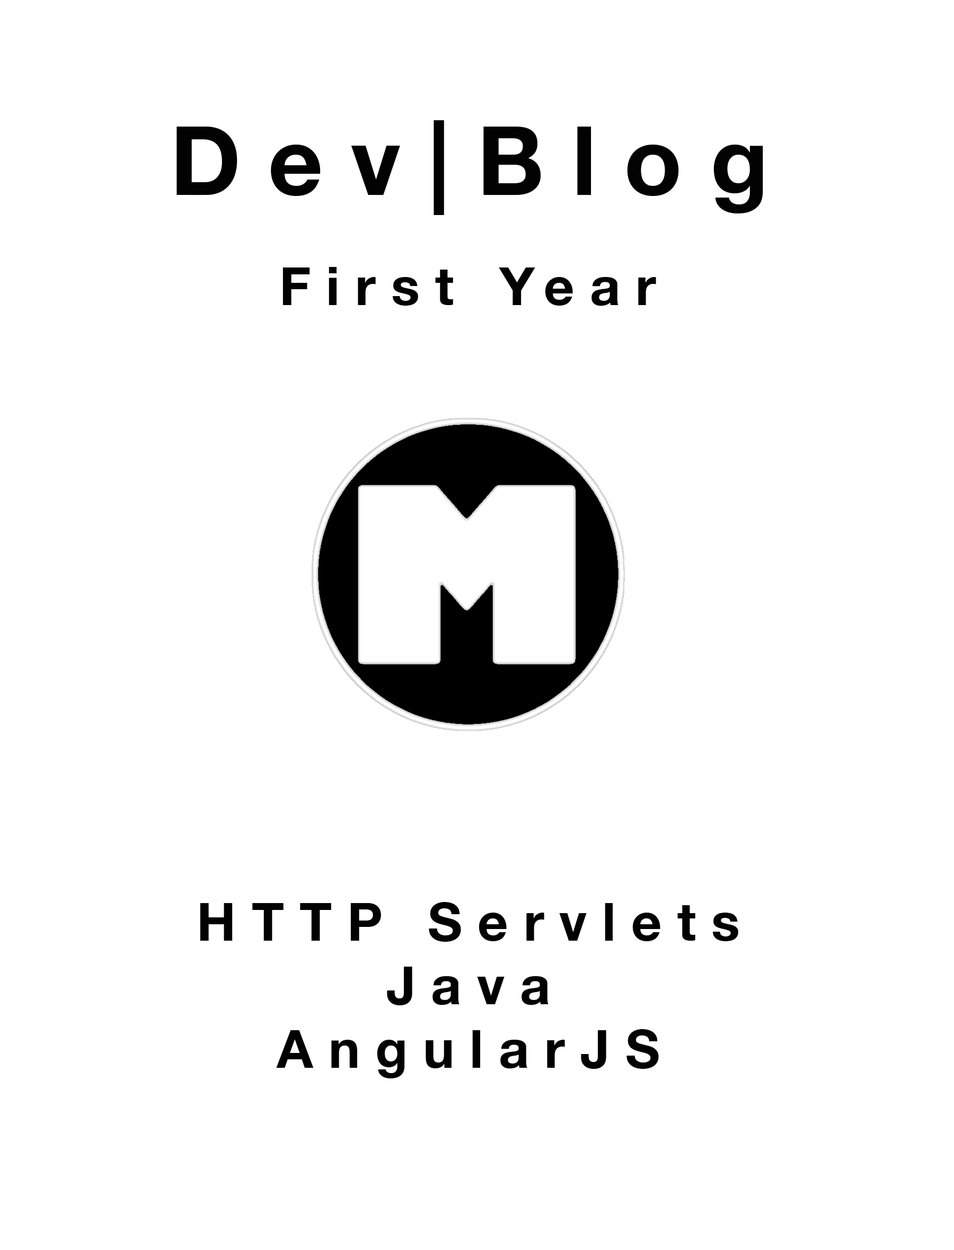
<style>
.page{position:relative;width:954px;height:1250px;background:#ffffff}
.page>*{position:absolute;margin:0}
.t1{font:95.4px "HelveticaNeue-Bold";letter-spacing:0.29em;color:#020202}
.t2{font:53px "HelveticaNeue-Bold";letter-spacing:0.29em;color:#020202}
</style>
<div class="page">
<p class="t1" style="left:176px;top:120px;width:587px;height:95px">Dev|Blog</p>
<p class="t2" style="left:282px;top:267px;width:374px;height:39px">First Year</p>
<p class="t2" style="left:200px;top:902px;width:538px;height:177px;text-align:center">HTTP Servlets<br>Java<br>AngularJS</p>
</div>
